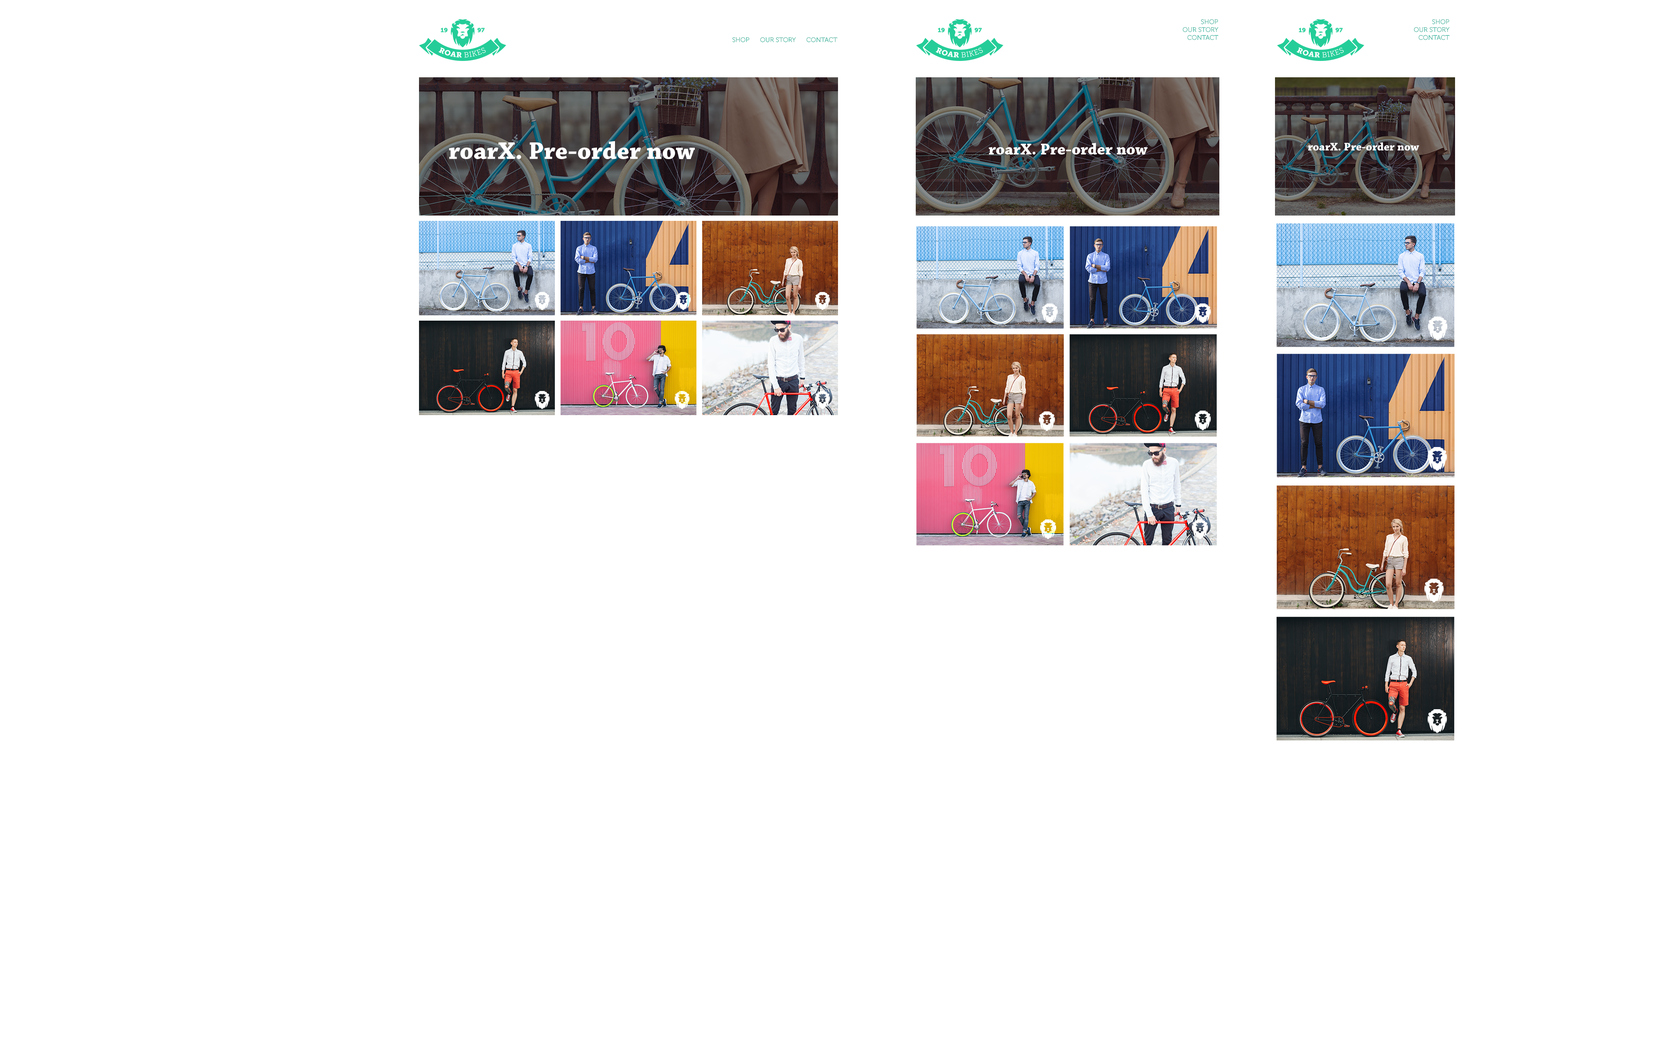
<style>
.page{position:relative;width:1676px;height:1047px;background:#ffffff}
.page>*{position:absolute;margin:0}
.t1{font:6.5px "Museo-300";color:#00a388;text-transform:uppercase}
.t2{font:25.4px "ChaparralPro-Bold";color:#ffffff}
.t3{font:16.4px "ChaparralPro-Bold";color:#ffffff}
.t4{font:11.5px "ChaparralPro-Bold";color:#ffffff}
</style>
<div class="page">
<p class="t1" style="left:1182px;top:19px;width:36px;height:21px;text-align:right">SHOP<br>      OUR STORY<br>      Contact</p>
<p class="t1" style="left:1413px;top:19px;width:36px;height:21px;text-align:right">SHOP<br>      OUR STORY<br>      Contact</p>
<p class="t1" style="left:732px;top:37px;width:105px;height:5px">SHOP      OUR STORY      Contact</p>
<p class="t2" style="left:449px;top:141px;width:246px;height:18px">roarX. Pre-order now</p>
<p class="t3" style="left:988px;top:143px;width:159px;height:12px">roarX. Pre-order now</p>
<p class="t4" style="left:1307px;top:142px;width:112px;height:9px">roarX. Pre-order now</p>
</div>
